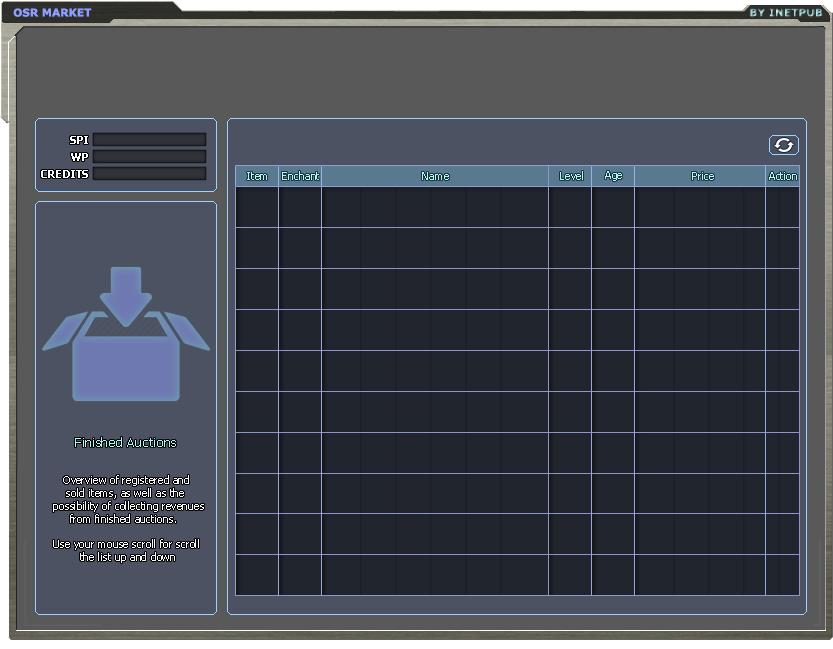
<style>
.page{position:relative;width:833px;height:649px;background:#21252e}
.page>*{position:absolute;margin:0}
.t1{font:10.7px "Verdana-Bold";color:#8ea0ff}
.t2{font:10.7px "Verdana-Bold"}
.t3{font:10.7px "Tahoma-Bold";color:#ffffff}
.t4{font:10.7px "Tahoma";color:#a4fff7}
.t5{font:13.3px "Tahoma";color:#a4fff7}
.t6{font:10.7px "Tahoma";color:#ffffff}
</style>
<div class="page">
<p class="t1" style="left:13px;top:8px;width:79px;height:9px">OSR MARKET</p>
<p class="t2" style="left:750px;top:8px;width:73px;height:9px">BY INETPUB</p>
<p class="t3" style="left:70px;top:136px;width:18px;height:8px">SPI</p>
<p class="t3" style="left:71px;top:153px;width:17px;height:8px">WP</p>
<p class="t3" style="left:41px;top:170px;width:47px;height:8px">CREDITS</p>
<p class="t4" style="left:247px;top:172px;width:20px;height:8px">Item</p>
<p class="t4" style="left:282px;top:171px;width:37px;height:9px">Enchant</p>
<p class="t4" style="left:422px;top:172px;width:27px;height:8px">Name</p>
<p class="t4" style="left:560px;top:171px;width:23px;height:9px">Level</p>
<p class="t4" style="left:605px;top:171px;width:17px;height:10px">Age</p>
<p class="t4" style="left:692px;top:172px;width:22px;height:8px">Price</p>
<p class="t4" style="left:769px;top:172px;width:28px;height:8px">Action</p>
<p class="t5" style="left:75px;top:437px;width:101px;height:10px">Finished Auctions</p>
<p class="t6" style="left:53px;top:475px;width:151px;height:88px">Overview of registered and<br>    sold items, as well as the<br>possibility of collecting revenues<br>     from finished auctions.<br><br>Use your mouse scroll for scroll<br>        the list up and down</p>
</div>
